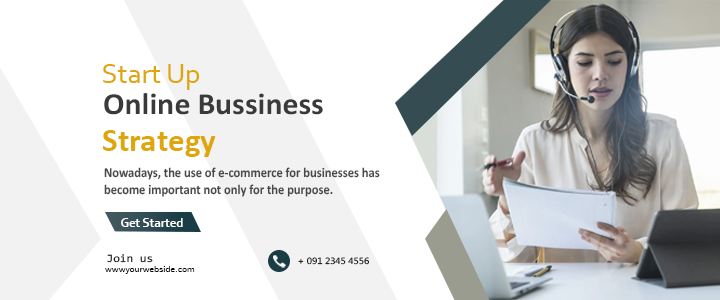
<style>
.page{position:relative;width:720px;height:300px;background:#ffffff}
.page>*{position:absolute;margin:0}
.t1{font:28.7px "Corbel";color:#dfa60a}
.t2{font:30.8px "Calibri-Bold";color:#3b3a3a}
.t3{font:33.3px "Calibri-Bold";color:#dfa60a}
.t4{font:13.8px/16.7px "Calibri-Bold";color:#4c4848;scale:0.91 1}
.t5{font:12.5px "Corbel-Bold";color:#ffffff}
.t6{font:11.2px "Consolas";color:#000000;scale:1.08 1}
.t7{font:8.9px "MicrosoftPhagsPa";scale:1.08 1}
.t8{font:8.4px "NewsGothicBT-Roman";color:#000000;scale:1.11 1}
</style>
<div class="page">
<p class="t1" style="left:103px;top:64px;width:97px;height:26px">Start Up</p>
<p class="t2" style="left:104px;top:93px;width:219px;height:22px">Online Bussiness</p>
<p class="t3" style="left:103px;top:130px;width:113px;height:27px">Strategy</p>
<p class="t4" style="left:104px;top:167px;width:276px;height:30px">Nowadays, the use of e-commerce for businesses has <br>become important not only for the purpose.</p>
<p class="t5" style="left:121px;top:218px;width:62px;height:9px">Get Started</p>
<p class="t6" style="left:107px;top:254px;width:46px;height:9px">Join us</p>
<p class="t7" style="left:298px;top:257px;width:71px;height:8px">+ 091 2345 4556</p>
<p class="t8" style="left:105px;top:266px;width:90px;height:8px">wwwyourwebside.com</p>
</div>
